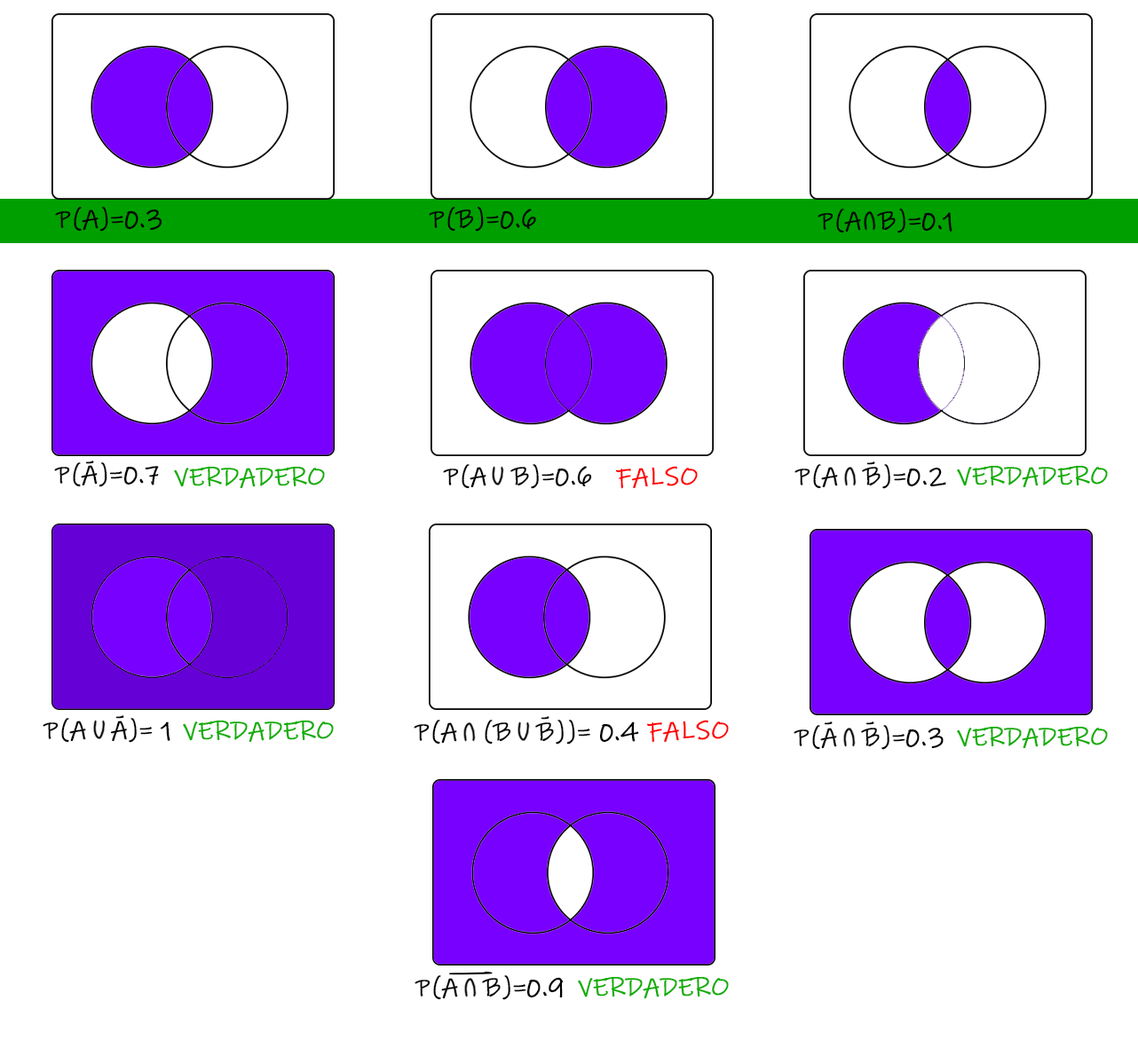
<style>
.page{position:relative;width:1138px;height:1048px;background:#ffffff}
.page>*{position:absolute;margin:0}
.t1{font:25.9px "InkFree";color:#000000;font-weight:bold}
.t2{font:25.9px "InkFree";color:#10ad00;font-weight:bold}
.t3{font:25.9px "InkFree";color:#ff0000;font-weight:bold}
.t4{font:25.8px "InkFree";color:#000000;font-weight:bold;scale:6.27 1}
</style>
<div class="page">
<p class="t1" style="left:55px;top:207px;width:107px;height:25px">P(A)=0.3</p>
<p class="t1" style="left:429px;top:207px;width:107px;height:25px">P(B)=0.6</p>
<p class="t1" style="left:817px;top:209px;width:135px;height:24px">P(A  B)=0.1</p>
<p class="t1" style="left:85px;top:461px;width:9px;height:3px">-</p>
<p class="t1" style="left:866px;top:461px;width:9px;height:4px">-</p>
<p class="t1" style="left:54px;top:462px;width:105px;height:25px">P(A)=0.7</p>
<p class="t2" style="left:174px;top:466px;width:151px;height:23px">VERDADERO</p>
<p class="t1" style="left:443px;top:464px;width:149px;height:25px">P(A   B)=0.6</p>
<p class="t3" style="left:615px;top:466px;width:83px;height:23px">FALSO</p>
<p class="t1" style="left:794px;top:464px;width:152px;height:25px">P(A   B)=0.2</p>
<p class="t2" style="left:957px;top:465px;width:151px;height:23px">VERDADERO</p>
<p class="t1" style="left:43px;top:718px;width:127px;height:25px">P(A   A)= 1</p>
<p class="t1" style="left:115px;top:715px;width:9px;height:4px">-</p>
<p class="t2" style="left:183px;top:720px;width:151px;height:23px">VERDADERO</p>
<p class="t1" style="left:414px;top:720px;width:225px;height:25px">P(A   (B   B))= 0.4</p>
<p class="t1" style="left:540px;top:716px;width:9px;height:4px">-</p>
<p class="t3" style="left:646px;top:720px;width:83px;height:23px">FALSO</p>
<p class="t1" style="left:793px;top:725px;width:150px;height:25px">P(A   B)=0.3</p>
<p class="t1" style="left:824px;top:722px;width:8px;height:3px">-</p>
<p class="t1" style="left:865px;top:722px;width:9px;height:3px">-</p>
<p class="t2" style="left:957px;top:726px;width:151px;height:23px">VERDADERO</p>
<p class="t1" style="left:414px;top:975px;width:149px;height:25px">P(A   B)=0.9</p>
<p class="t4" style="left:448px;top:971px;width:45px;height:4px">-</p>
<p class="t2" style="left:578px;top:976px;width:151px;height:23px">VERDADERO</p>
</div>
